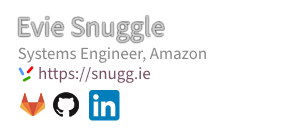
<style>
.page{position:relative;width:300px;height:131px;background:#ffffff}
.page>*{position:absolute;margin:0}
.t1{font:28px "SourceSans3-Regular";color:#cccccc}
.t2{font:17px "SourceSans3-Regular";color:#888888}
.t3{font:17px "SourceSans3-Regular";color:#795165}
</style>
<div class="page">
<p class="t1" style="left:18px;top:16px;width:146px;height:27px">Evie Snuggle</p>
<p class="t2" style="left:18px;top:47px;width:188px;height:36px">Systems Engineer, Amazon<br>      <span class="t3">https://snugg.ie</span></p>
</div>
